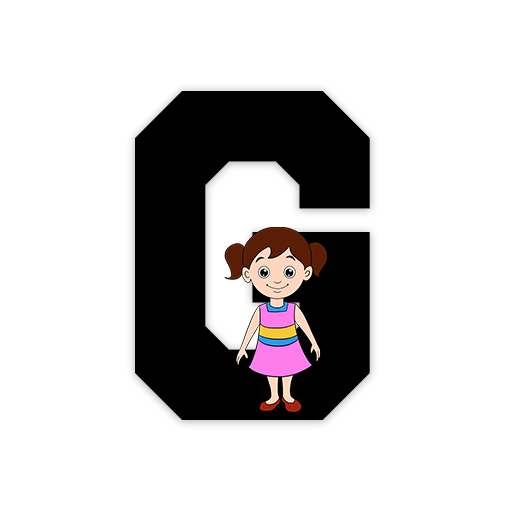
<style>
.page{position:relative;width:512px;height:512px;background:#ffffff}
.page>*{position:absolute;margin:0}
.t1{font:328.8px "UniversityRegular";color:#000000}
</style>
<div class="page">
<p class="t1" style="left:135px;top:91px;width:235px;height:329px">G</p>
</div>
